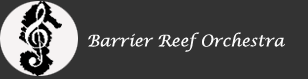
<style>
.page{position:relative;width:308px;height:79px;background:#333333}
.page>*{position:absolute;margin:0}
.t1{font:16px "LucidaCalligraphy-Italic";color:#fcfcfc}
.t2{font:16px "BaskOldFace";color:#fcfcfc}
</style>
<div class="page">
<p class="t1" style="left:88px;top:32px;width:197px;height:20px"><span class="t2">  </span>Barrier Reef Orchestra</p>
</div>
